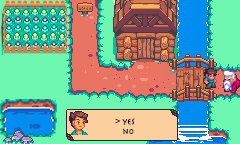
<style>
.page{position:relative;width:240px;height:144px;background:#6df7b1}
.page>*{position:absolute;margin:0}
.t1{font:8.3px "Herculanum";color:#000000}
</style>
<div class="page">
<p class="t1" style="left:115px;top:118px;width:20px;height:17px">&gt; yes<br>   no</p>
</div>
